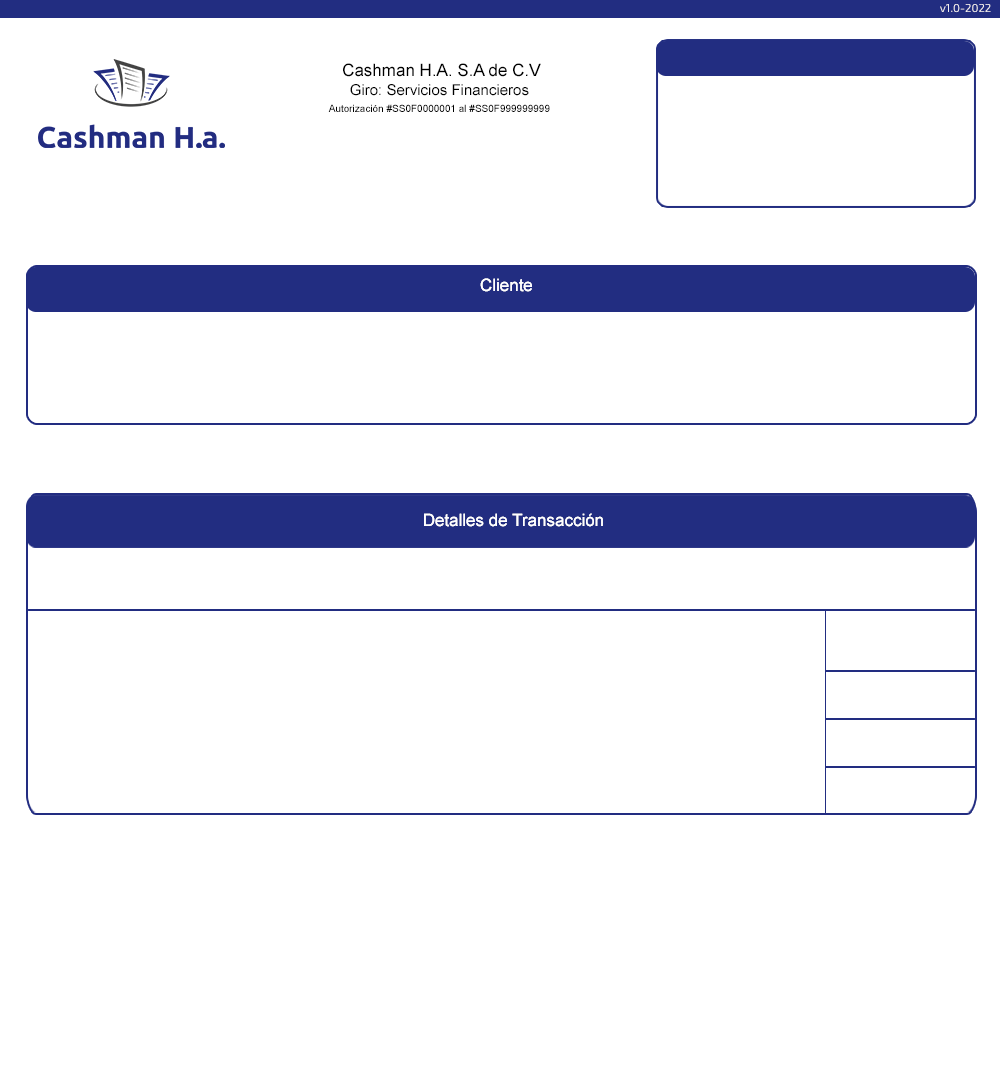
<style>
.page{position:relative;width:1000px;height:1090px;background:#ffffff}
.page>*{position:absolute;margin:0}
.t1{font:11.4px "Exo2-Regular";color:#f3efee}
.t2{font:17px "ArialMT";color:#000000}
.t3{font:15px "ArialMT";color:#000000}
.t4{font:10px "ArialMT";color:#000000}
.t5{font:17px "ArialMT";color:#ffffff}
</style>
<div class="page">
<p class="t1" style="left:940px;top:4px;width:51px;height:9px">v1.0-2022</p>
<p class="t2" style="left:343px;top:63px;width:198px;height:14px">Cashman H.A. S.A de C.V</p>
<p class="t3" style="left:350px;top:84px;width:179px;height:12px">Giro: Servicios Financieros</p>
<p class="t4" style="left:328px;top:104px;width:222px;height:8px">Autorización #SS0F0000001 al #SS0F999999999</p>
<p class="t5" style="left:480px;top:278px;width:52px;height:14px">Cliente</p>
<p class="t5" style="left:480px;top:278px;width:52px;height:14px">Cliente</p>
<p class="t5" style="left:424px;top:513px;width:179px;height:14px">Detalles de Transacción</p>
<p class="t5" style="left:424px;top:513px;width:179px;height:14px">Detalles de Transacción</p>
</div>
